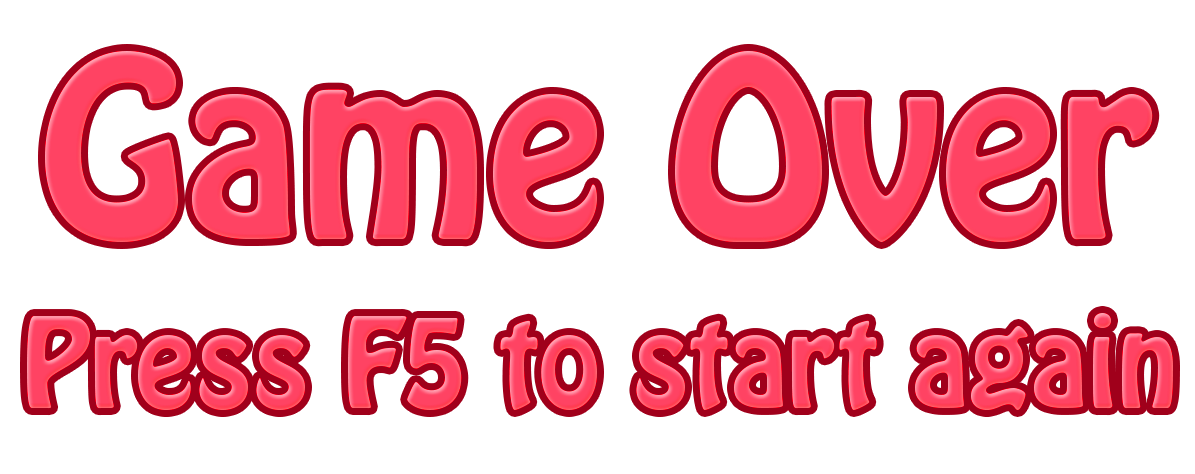
<style>
.page{position:relative;width:1195px;height:474px;background:#ffffff}
.page>*{position:absolute;margin:0}
.t1{font:222px "HoboStd";color:#ff4363}
.t2{font:111px "HoboStd";color:#ff4563}
</style>
<div class="page">
<p class="t1" style="left:45px;top:50px;width:1108px;height:192px">Game Over</p>
<p class="t2" style="left:27px;top:313px;width:1146px;height:97px">Press F5 to start again</p>
</div>
